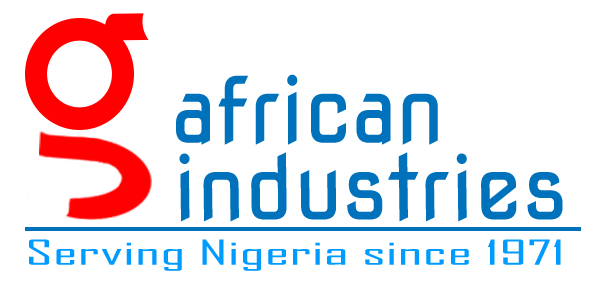
<style>
.page{position:relative;width:600px;height:294px;background:#ffffff}
.page>*{position:absolute;margin:0}
.t1{font:91px "NovaSquare";color:#0072bc;scale:0.94 1}
.t2{font:88.5px "NovaSquare";color:#0072bc}
.t3{font:33px "AgencyFB-Reg";color:#009bff;scale:2.02 1}
</style>
<div class="page">
<p class="t1" style="left:176px;top:74px;width:262px;height:71px">african</p>
<p class="t2" style="left:179px;top:152px;width:384px;height:70px">industries</p>
<p class="t3" style="left:29px;top:239px;width:532px;height:32px">Serving Nigeria since 1971</p>
</div>
